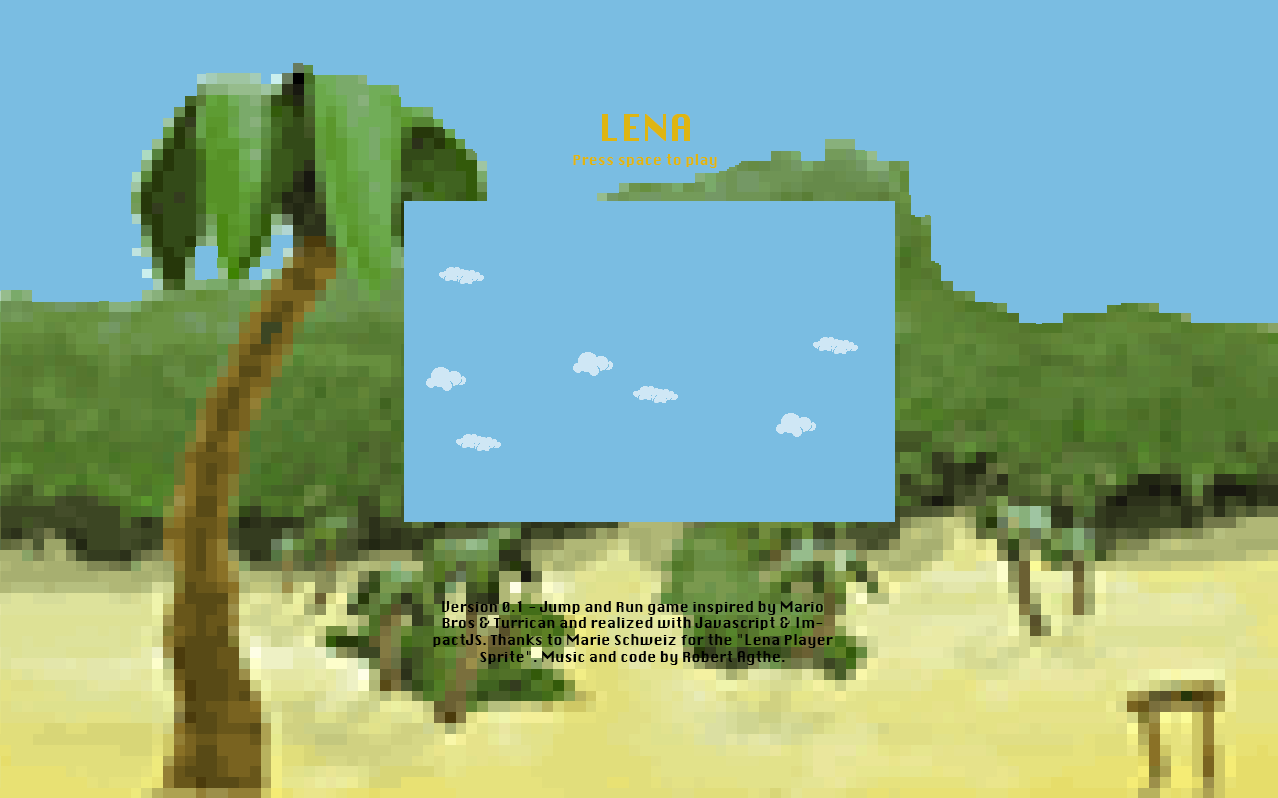
<style>
.page{position:relative;width:1278px;height:798px;background:#7abde2}
.page>*{position:absolute;margin:0}
.t1{font:36px "Krungthep";color:#deb512}
.t2{font:14px "Krungthep";color:#deb512}
.t3{font:14px "Krungthep";color:#000000}
</style>
<div class="page">
<p class="t1" style="left:602px;top:114px;width:88px;height:27px">LENA</p>
<p class="t2" style="left:573px;top:154px;width:144px;height:14px">Press space to play</p>
<p class="t3" style="left:433px;top:601px;width:400px;height:64px;text-align:center">Version 0.1 - Jump and Run game inspired by Mario Bros &amp; Turrican and realized with Javascript &amp; ImpactJS. Thanks to Marie Schweiz for the "Lena Player Sprite". Music and code by Robert Agthe.</p>
</div>
